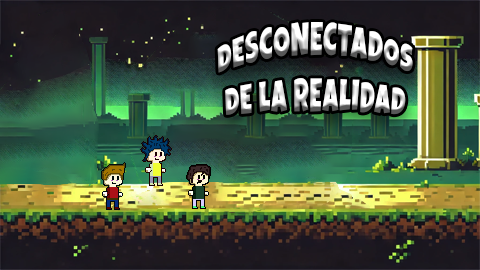
<style>
.page{position:relative;width:480px;height:270px}
.page>*{position:absolute;margin:0}
.t1{font:24px "LuckiestGuy-Regular";letter-spacing:0.05em}
</style>
<div class="page">
<p class="t1" style="left:217px;top:22px;width:196px;height:93px;text-align:center">DESCONECTADOS <br>DE LA REALIDAD</p>
</div>
